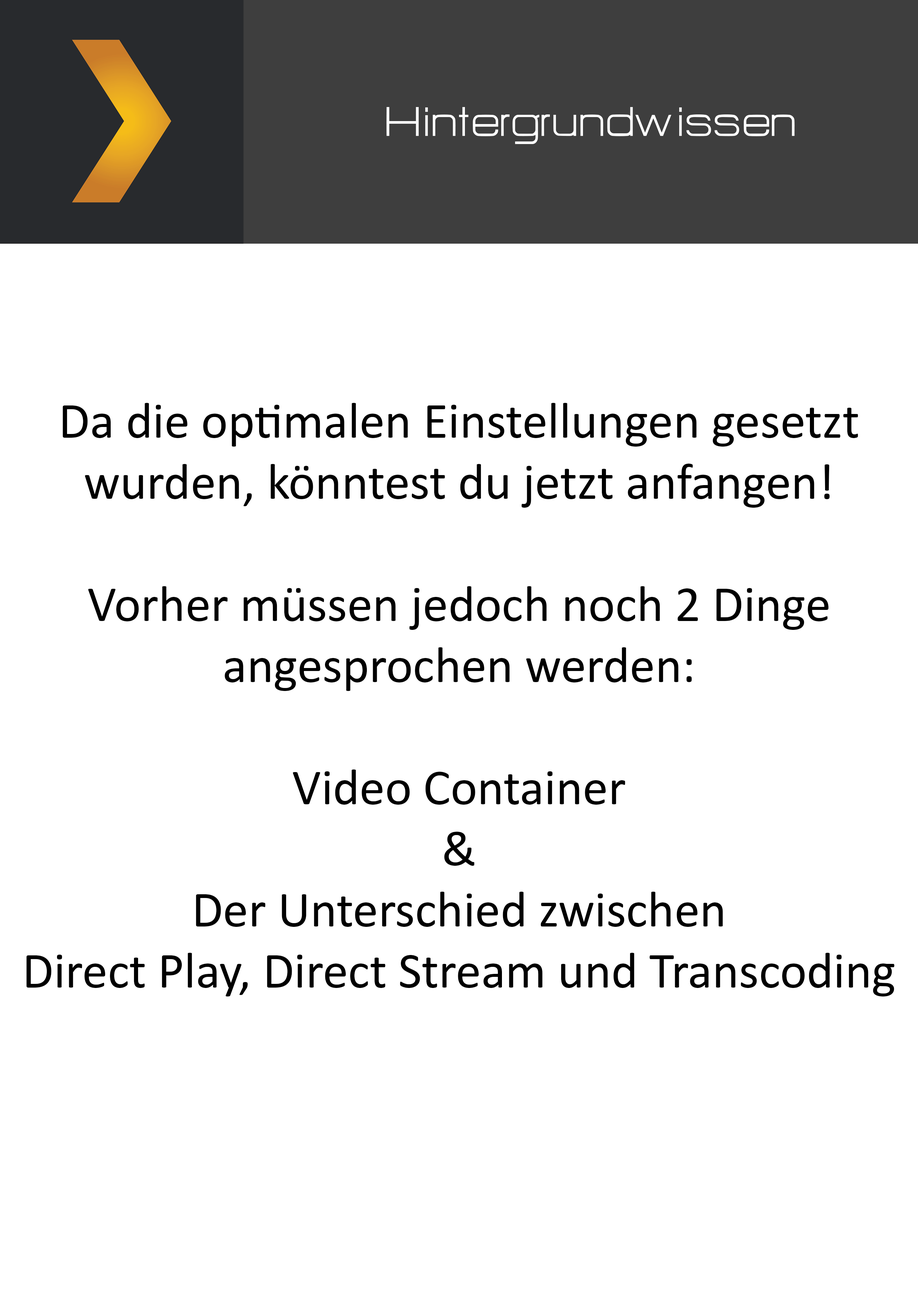
<style>
.page{position:relative;width:918px;height:1299px;background:#ffffff}
.page>*{position:absolute;margin:0}
.t1{font:50.9px "HURTMOLDPersonalUse-Regular";color:#ffffff}
.t2{font:50.9px "Calibri";color:#000000}
</style>
<div class="page">
<p class="t1" style="left:387px;top:107px;width:408px;height:37px">Hintergrundwissen</p>
<p class="t2" style="left:26px;top:403px;width:868px;height:593px;text-align:center">Da die optimalen Einstellungen gesetzt<br>wurden, könntest du jetzt anfangen!<br><br>Vorher müssen jedoch noch 2 Dinge<br>angesprochen werden:<br><br>Video Container<br>&amp;<br>Der Unterschied zwischen<br>Direct Play, Direct Stream und Transcoding</p>
</div>
